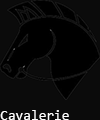
<style>
.page{position:relative;width:100px;height:120px;background:#0b0b0b}
.page>*{position:absolute;margin:0}
.t1{font:14px "Consolas";color:#ffffff}
</style>
<div class="page">
<p class="t1" style="left:0px;top:110px;width:69px;height:10px">Cavalerie</p>
</div>
